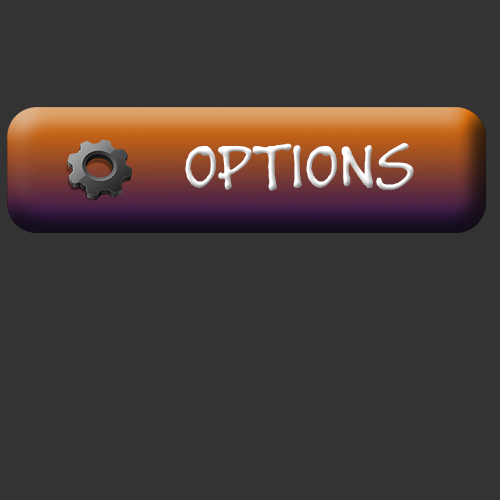
<style>
.page{position:relative;width:500px;height:500px;background:#333333}
.page>*{position:absolute;margin:0}
.t1{font:70.6px "BuxtonSketch"}
.t2{font:52.9px "CopperplateGothic-Light"}
</style>
<div class="page">
<p class="t1" style="left:185px;top:143px;width:229px;height:48px"><span class="t2">           </span>OPTIONS</p>
</div>
